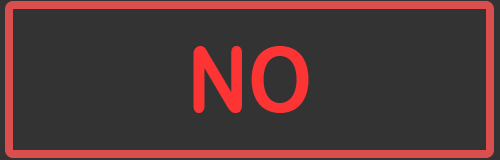
<style>
.page{position:relative;width:500px;height:160px;background:#333333}
.page>*{position:absolute;margin:0}
.t1{font:90px "ArialRoundedMTBold";color:#fd3434;scale:0.9 1}
</style>
<div class="page">
<p class="t1" style="left:193px;top:46px;width:116px;height:67px">NO</p>
</div>
